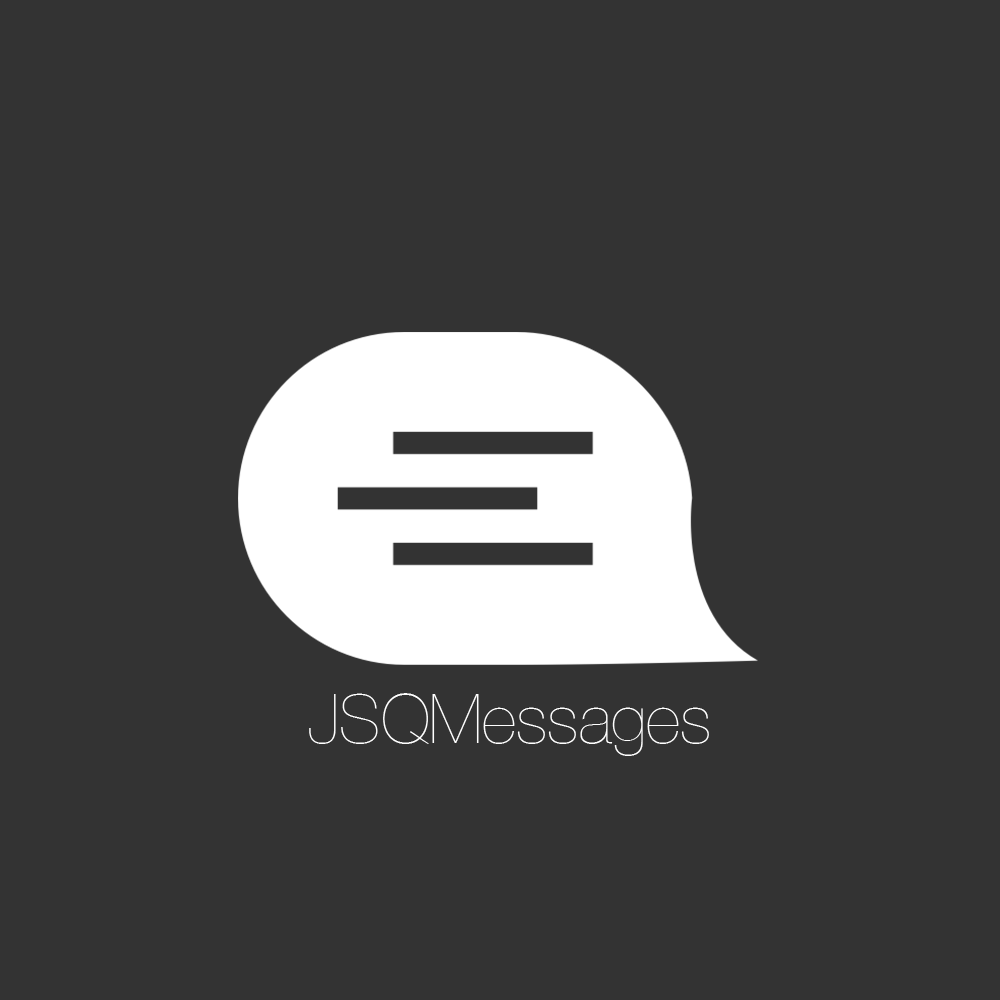
<style>
.page{position:relative;width:1000px;height:1000px;background:#333333}
.page>*{position:absolute;margin:0}
.t1{font:67.7px "HelveticaNeue-UltraLight";color:#ffffff}
</style>
<div class="page">
<p class="t1" style="left:309px;top:693px;width:400px;height:63px">JSQMessages</p>
</div>
